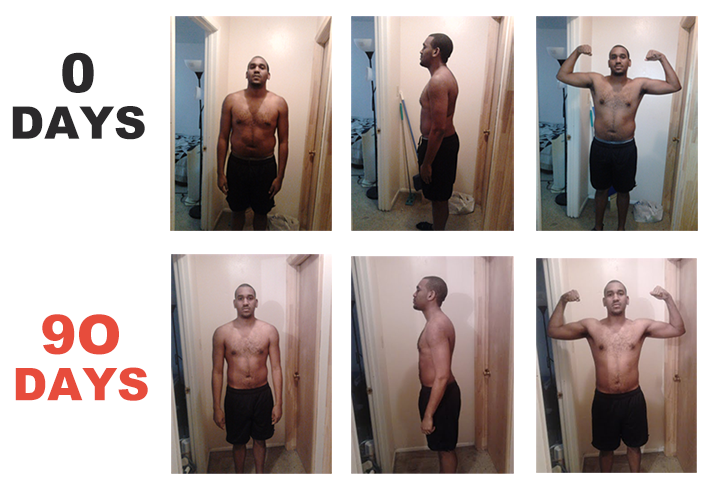
<style>
.page{position:relative;width:716px;height:482px;background:#ffffff}
.page>*{position:absolute;margin:0}
.t1{font:45px/46.5px "Arial-Black";color:#2b292b}
.t2{font:54px/46.5px "Arial-Black";color:#2b292b}
.t3{font:45px/46.5px "Arial-Black";color:#e74c3c}
.t4{font:54px "Arial-Black";color:#e74c3c}
.t5{font:54px/46.5px "Arial-Black";color:#e74c3c}
</style>
<div class="page">
<p class="t1" style="left:12px;top:52px;width:133px;height:88px;text-align:center"><span class="t2"> 0 <br></span>DAYS</p>
<p class="t3" style="left:15px;top:314px;width:133px;height:87px;text-align:center"><span class="t4"> </span><span class="t5">9O <br></span>DAYS</p>
</div>
